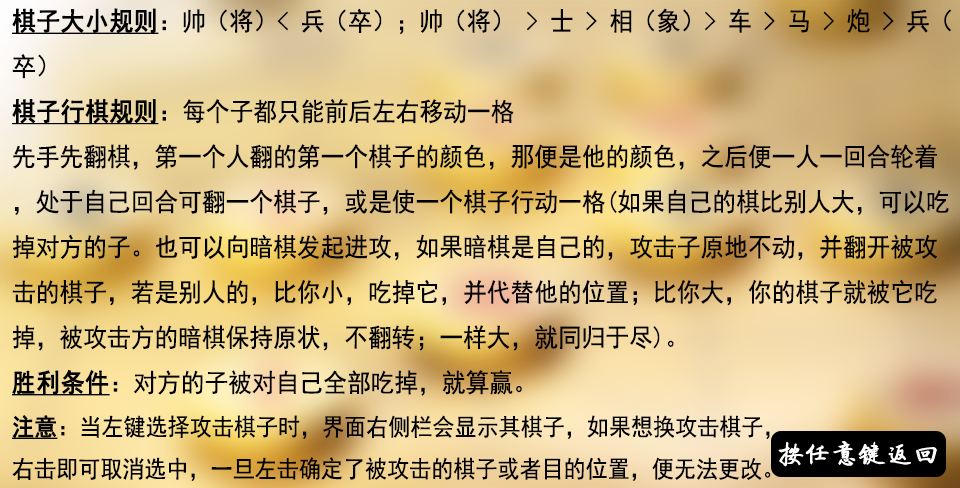
<style>
.page{position:relative;width:960px;height:488px}
.page>*{position:absolute;margin:0}
.t1{font:25.8px "SimHei";color:#000000;scale:0.92 1}
.t2{font:25.8px "SimHei";color:#000000;font-weight:bold;text-decoration:underline;scale:0.92 1}
.t3{font:24px "SimHei";color:#000000;font-weight:bold;text-decoration:underline;scale:0.92 1}
.t4{font:24px "SimHei";color:#000000;scale:0.92 1}
.t5{font:26.5px "FZQTJW--GB1-0";color:#ffffff;font-weight:bold}
</style>
<div class="page">
<p class="t1" style="left:12px;top:8px;width:939px;height:473px"><span class="t2">棋子大小规则</span>：帅（将）&lt; 兵（卒）；帅（将） &gt; 士 &gt; 相（象）&gt; 车 &gt; 马 &gt; 炮 &gt; 兵（卒）<br><span class="t2">棋子行棋规则</span>：每个子都只能前后左右移动一格<br>先手先翻棋，第一个人翻的第一个棋子的颜色，那便是他的颜色，之后便一人一回合轮着，处于自己回合可翻一个棋子，或是使一个棋子行动一格(如果自己的棋比别人大，可以吃掉对方的子。也可以向暗棋发起进攻，如果暗棋是自己的，攻击子原地不动，并翻开被攻击的棋子，若是别人的，比你小，吃掉它，并代替他的位置；比你大，你的棋子就被它吃掉，被攻击方的暗棋保持原状，不翻转；一样大，就同归于尽)。<br><span class="t2">胜利条件</span>：对方的子被对自己全部吃掉，就算赢。<br><span class="t3">注意</span><span class="t4">：当左键选择攻击棋子时，界面右侧栏会显示其棋子，如果想换攻击棋子，<br>右击即可取消选中，一旦左击确定了被攻击的棋子或者目的位置，便无法更改。</span></p>
<p class="t5" style="left:778px;top:441px;width:159px;height:26px">按任意键返回</p>
</div>
